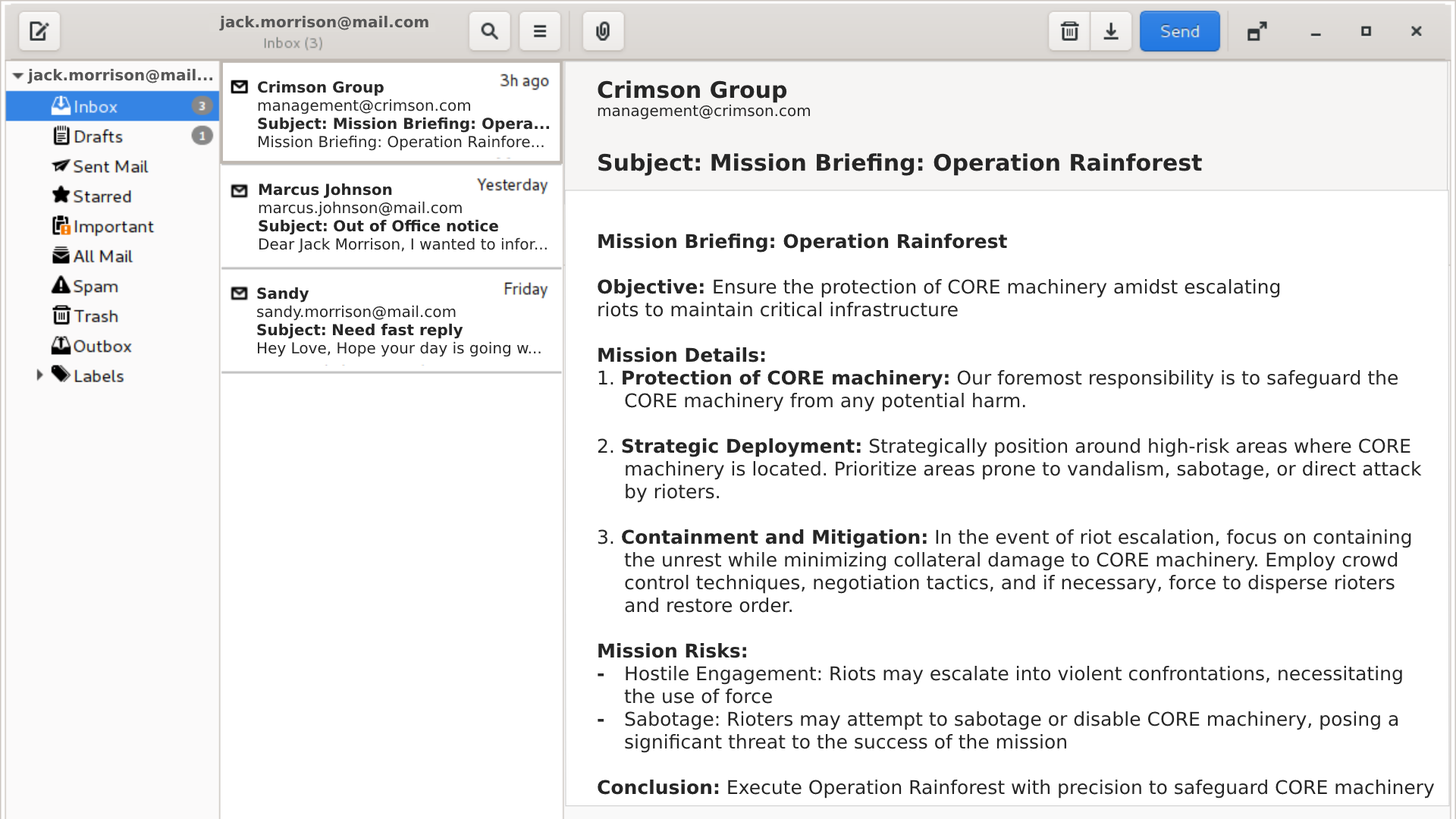
<style>
.page{position:relative;width:1456px;height:819px;background:#ffffff}
.page>*{position:absolute;margin:0}
.t1{font:15.2px "DejaVuSans-Bold";color:#565656}
.t2{font:15.2px "DejaVuSans";color:#262626}
.t3{font:15.2px "DejaVuSans-Bold";color:#262626}
.t4{font:19px "DejaVuSans";color:#262626}
.t5{font:22.7px "DejaVuSans-Bold";color:#262626}
.t6{font:19px "DejaVuSans-Bold";color:#262626}
</style>
<div class="page">
<p class="t1" style="left:219px;top:15px;width:209px;height:16px">jack.morrison@mail.com</p>
<p class="t1" style="left:27px;top:68px;width:185px;height:16px">jack.morrison@mail...</p>
<p class="t2" style="left:257px;top:80px;width:292px;height:71px"><span class="t3">Crimson Group<br></span>management@crimson.com<br><span class="t3">Subject: Mission Briefing: Opera...<br></span>Mission Briefing: Operation Rainfore...</p>
<p class="t4" style="left:598px;top:80px;width:837px;height:719px"><span class="t5">Crimson Group<br></span><span class="t2">management@crimson.com<br><br></span><span class="t5">Subject: Mission Briefing: Operation Rainforest<br><br><br></span><span class="t6">Mission Briefing: Operation Rainforest<br><br>Objective: </span>Ensure the protection of CORE machinery amidst escalating <br>riots to maintain critical infrastructure<br><br><span class="t6">Mission Details:<br></span>1. <span class="t6">Protection of CORE machinery:</span> Our foremost responsibility is to safeguard the <br> CORE machinery from any potential harm. <br><br>2. <span class="t6">Strategic Deployment:</span> Strategically position around high-risk areas where CORE <br> machinery is located. Prioritize areas prone to vandalism, sabotage, or direct attack <br> by rioters.<br><br>3. <span class="t6">Containment and Mitigation:</span> In the event of riot escalation, focus on containing <br> the unrest while minimizing collateral damage to CORE machinery. Employ crowd <br> control techniques, negotiation tactics, and if necessary, force to disperse rioters <br> and restore order.<br><br><span class="t6">Mission Risks:<br>- </span>Hostile Engagement: Riots may escalate into violent confrontations, necessitating <br> the use of force <br><span class="t6">- </span>Sabotage: Rioters may attempt to sabotage or disable CORE machinery, posing a <br> significant threat to the success of the mission<br><br><span class="t6">Conclusion:</span> Execute Operation Rainforest with precision to safeguard CORE machinery</p>
<p class="t2" style="left:259px;top:183px;width:288px;height:70px"><span class="t3">Marcus Johnson<br></span>marcus.johnson@mail.com<br><span class="t3">Subject: Out of Office notice<br></span>Dear Jack Morrison, I wanted to infor...</p>
<p class="t2" style="left:257px;top:287px;width:284px;height:70px"><span class="t3">Sandy<br></span>sandy.morrison@mail.com<br><span class="t3">Subject: Need fast reply<br></span>Hey Love, Hope your day is going w...</p>
</div>
